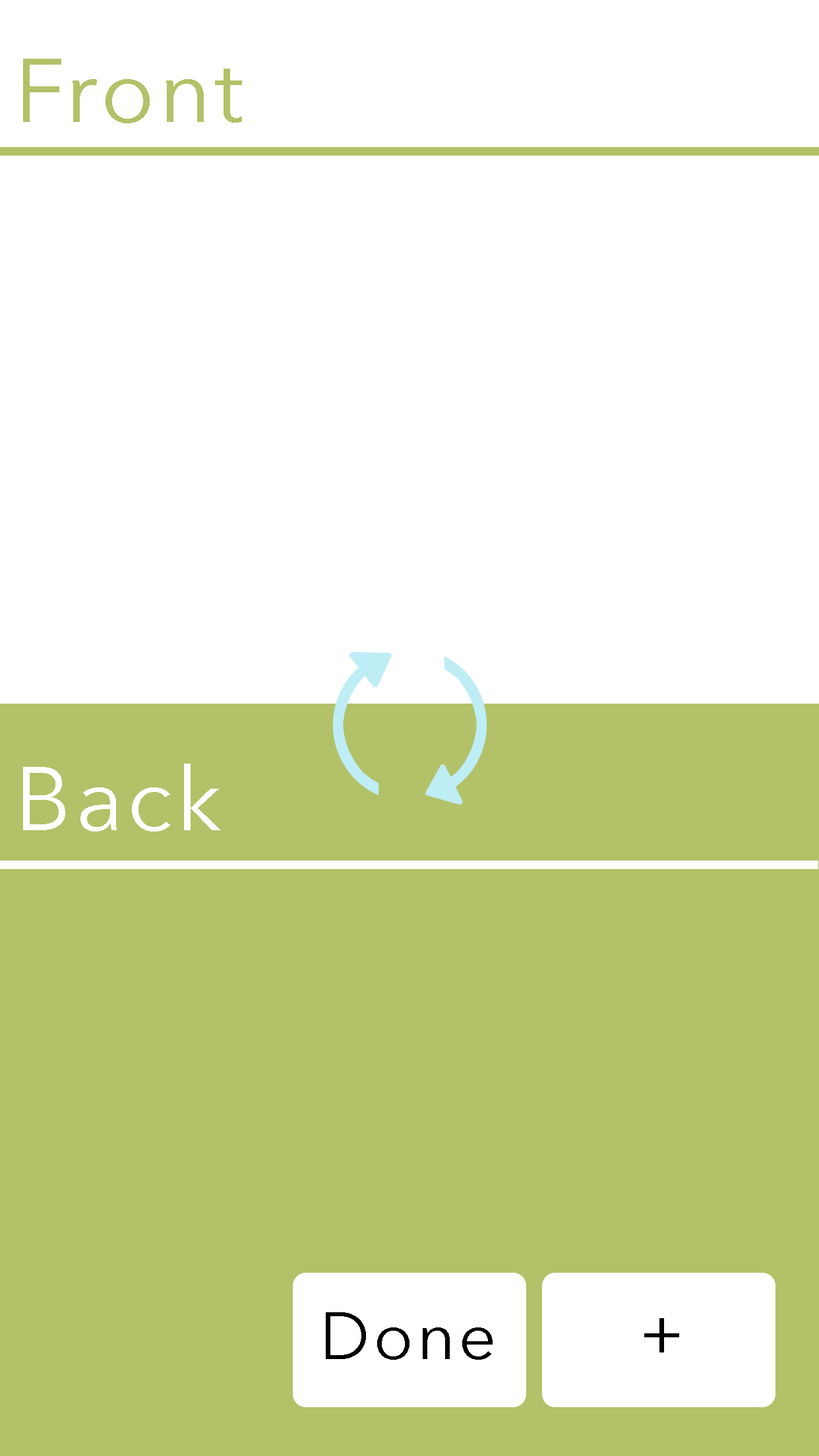
<style>
.page{position:relative;width:819px;height:1456px;background:#ffffff}
.page>*{position:absolute;margin:0}
.t1{font:88.8px "AvenirNext-Regular";letter-spacing:0.05em;color:#b3c168}
.t2{font:88.8px "AvenirNext-Regular";letter-spacing:0.05em;color:#ffffff}
.t3{font:65.9px "AvenirNext-Regular";letter-spacing:0.05em;color:#000000}
</style>
<div class="page">
<p class="t1" style="left:23px;top:59px;width:219px;height:64px">Front</p>
<p class="t2" style="left:23px;top:764px;width:198px;height:68px">Back</p>
<p class="t3" style="left:326px;top:1312px;width:167px;height:48px">Done</p>
<p class="t3" style="left:644px;top:1318px;width:35px;height:34px">+</p>
</div>
